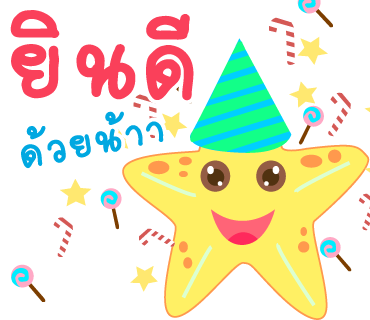
<style>
.page{position:relative;width:370px;height:320px;background:#ffffff}
.page>*{position:absolute;margin:0}
.t1{font:150px "2005_iannnnnMTV";letter-spacing:0.025em;color:#fa405a;scale:1.06 1}
.t2{font:63px "2005_iannnnnMTV";letter-spacing:0.03em;color:#00a8e1;scale:1.06 1}
</style>
<div class="page">
<p class="t1" style="left:10px;top:10px;width:184px;height:91px">ยินดี</p>
<p class="t2" style="left:21px;top:111px;width:143px;height:58px;rotate:-10deg">ด้วยน้าา</p>
</div>
